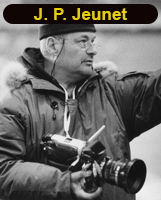
<style>
.page{position:relative;width:161px;height:200px}
.page>*{position:absolute;margin:0}
.t1{font:16.4px "Arial-BoldMT";letter-spacing:0.005em;color:#e9d000;scale:1.04 1}
</style>
<div class="page">
<p class="t1" style="left:34px;top:8px;width:93px;height:12px">J. P. Jeunet</p>
</div>
